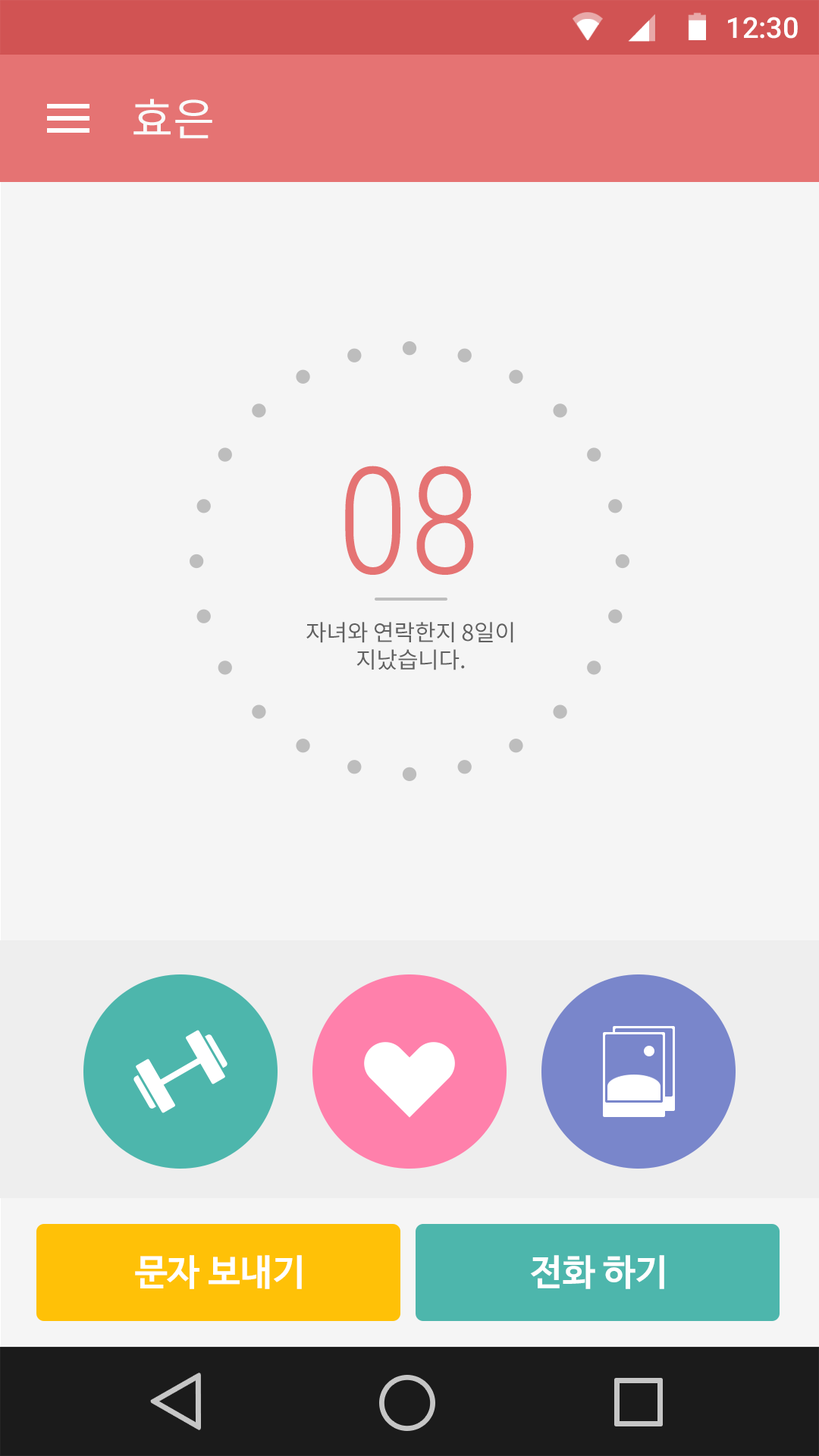
<style>
.page{position:relative;width:819px;height:1456px;background:#f5f5f5}
.page>*{position:absolute;margin:0}
.t1{font:28.8px "Roboto-Medium";color:#ffffff}
.t2{font:45.5px "NotoSansCJKkr-Regular";letter-spacing:-0.005em;color:#fafafa}
.t3{font:148.6px "RobotoCondensed-Light";letter-spacing:-0.005em;color:#e57373}
.t4{font:22.7px/27.3px "NotoSansCJKkr-Regular";letter-spacing:-0.005em;color:#616161}
.t5{font:36.4px "NanumBarunGothicBold";color:#ffffff}
</style>
<div class="page">
<p class="t1" style="left:728px;top:17px;width:70px;height:22px">12:30</p>
<p class="t2" style="left:133px;top:99px;width:79px;height:40px">효은</p>
<p class="t3" style="left:345px;top:466px;width:129px;height:109px">08</p>
<p class="t4" style="left:306px;top:622px;width:207px;height:48px;text-align:center">자녀와 연락한지 8일이<br>지났습니다.</p>
<p class="t5" style="left:135px;top:1255px;width:167px;height:34px">문자 보내기</p>
<p class="t5" style="left:530px;top:1255px;width:134px;height:34px">전화 하기</p>
</div>
